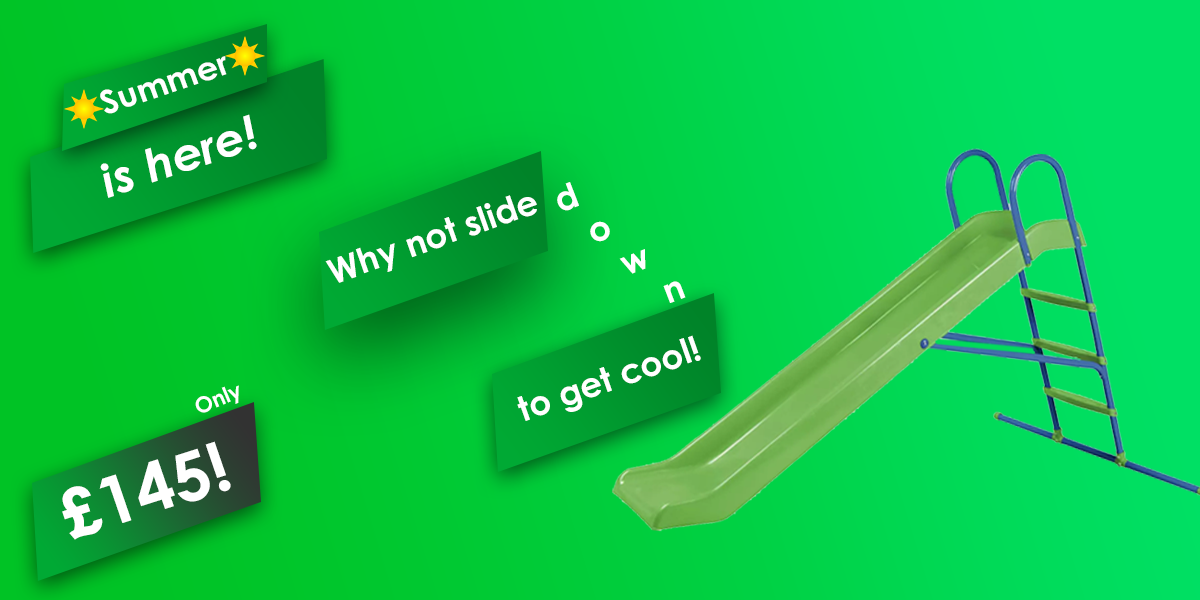
<style>
.page{position:relative;width:1200px;height:600px}
.page>*{position:absolute;margin:0}
.t1{font:32.5px "CenturyGothic-Bold";color:#ffffff;scale:1.03 1}
.t2{font:45.5px "CenturyGothic-BoldItalic";color:#ffffff;scale:1.03 1}
.t3{font:34.5px "CenturyGothic-Bold";color:#ffffff}
.t4{font:21.6px "CenturyGothic-Bold";color:#ffffff}
.t5{font:67.3px "CenturyGothic-Bold";color:#ffffff}
</style>
<div class="page">
<p class="t1" style="left:100px;top:56px;width:127px;height:58px;rotate:-19deg">Summer</p>
<p class="t2" style="left:100px;top:114px;width:157px;height:84px;rotate:-19deg">is here!</p>
<p class="t3" style="left:557px;top:182px;width:129px;height:121px;rotate:-21deg">d<br>  o<br>    w<br>       n</p>
<p class="t3" style="left:325px;top:195px;width:212px;height:88px;rotate:-19deg">Why not slide</p>
<p class="t3" style="left:517px;top:335px;width:184px;height:86px;rotate:-19deg">to get cool!</p>
<p class="t4" style="left:195px;top:385px;width:44px;height:28px;rotate:-23deg">Only</p>
<p class="t5" style="left:62px;top:441px;width:169px;height:99px;rotate:-18deg">£145!</p>
</div>
